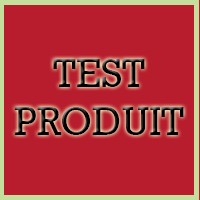
<style>
.page{position:relative;width:200px;height:200px;background:#b71d2c}
.page>*{position:absolute;margin:0}
.t1{font:40px "Rockwell";color:#000000}
</style>
<div class="page">
<p class="t1" style="left:14px;top:59px;width:170px;height:76px;text-align:center">TEST<br>PRODUIT</p>
</div>
